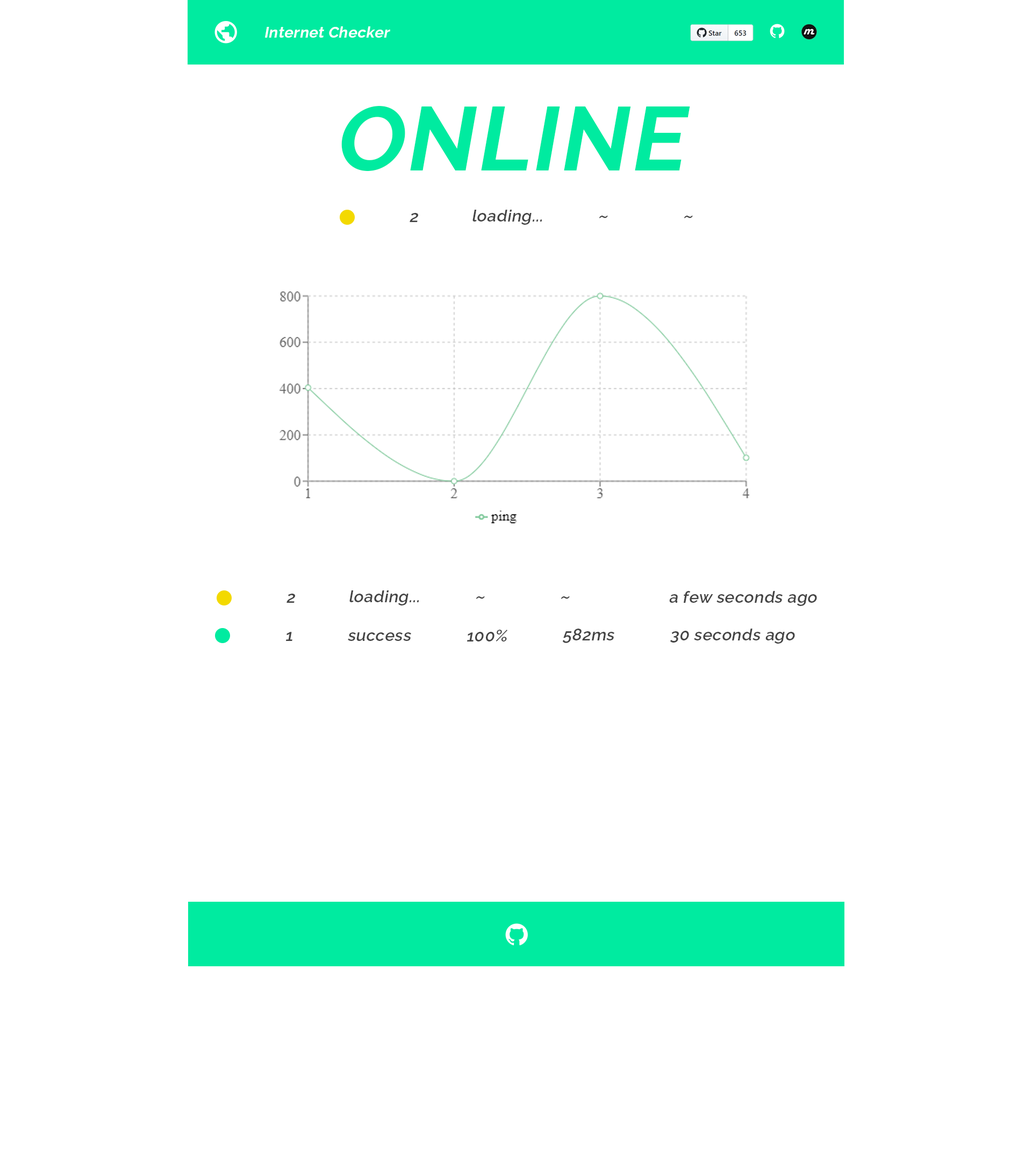
<style>
.page{position:relative;width:1032px;height:1155px;background:#ffffff}
.page>*{position:absolute;margin:0}
.t1{font:14.9px "Raleway-v4020-Bold";letter-spacing:0.025em;color:#ffffff;font-style:italic}
.t2{font:90px "Raleway-v4020-Bold";letter-spacing:0.025em;color:#00eba0;font-style:italic}
.t3{font:16.1px "Raleway-v4020-SemiBold";letter-spacing:0.025em;color:#444444;font-style:italic}
.t4{font:19.4px "Raleway-v4020-SemiBold";letter-spacing:0.025em;color:#444444;font-style:italic}
</style>
<div class="page">
<p class="t1" style="left:265px;top:26px;width:125px;height:12px">Internet Checker</p>
<p class="t2" style="left:341px;top:106px;width:349px;height:65px">ONLINE</p>
<p class="t3" style="left:473px;top:210px;width:70px;height:15px">loading...</p>
<p class="t3" style="left:410px;top:213px;width:8px;height:9px">2</p>
<p class="t4" style="left:599px;top:216px;width:9px;height:2px">~</p>
<p class="t4" style="left:684px;top:216px;width:9px;height:2px">~</p>
<p class="t3" style="left:287px;top:594px;width:8px;height:9px">2</p>
<p class="t3" style="left:350px;top:590px;width:69px;height:15px">loading...</p>
<p class="t3" style="left:669px;top:591px;width:148px;height:15px">a few seconds ago</p>
<p class="t4" style="left:476px;top:596px;width:9px;height:3px">~</p>
<p class="t4" style="left:561px;top:596px;width:9px;height:3px">~</p>
<p class="t3" style="left:467px;top:630px;width:41px;height:11px">100%</p>
<p class="t3" style="left:562px;top:629px;width:53px;height:14px">582ms</p>
<p class="t3" style="left:670px;top:629px;width:125px;height:15px">30 seconds ago</p>
<p class="t3" style="left:286px;top:632px;width:7px;height:9px">1</p>
<p class="t3" style="left:348px;top:632px;width:63px;height:9px">success</p>
</div>
